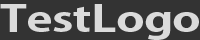
<style>
.page{position:relative;width:200px;height:40px;background:#333333}
.page>*{position:absolute;margin:0}
.t1{font:36px "KozGoPr6N-Bold";letter-spacing:-0.015em;color:#dcdcdc;scale:1.35 1}
</style>
<div class="page">
<p class="t1" style="left:0px;top:4px;width:199px;height:36px">TestLogo</p>
</div>
